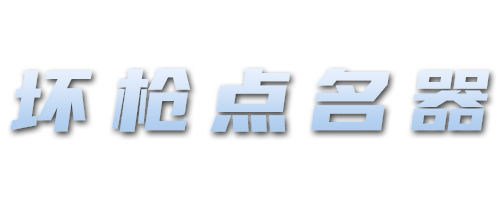
<style>
.page{position:relative;width:500px;height:200px;background:#ffffff}
.page>*{position:absolute;margin:0}
.t1{font:87.5px "YouSheBiaoTiHei";letter-spacing:0.22em}
</style>
<div class="page">
<p class="t1" style="left:10px;top:68px;width:480px;height:64px">坏枪点名器</p>
</div>
